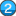
<style>
.page{position:relative;width:16px;height:16px;background:#29b6ff}
.page>*{position:absolute;margin:0}
.t1{font:13px "PublicSans-SemiBold";color:#eeeeee}
</style>
<div class="page">
<p class="t1" style="left:4px;top:3px;width:8px;height:10px">2</p>
</div>
